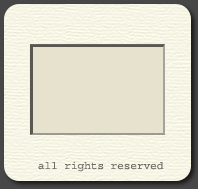
<style>
.page{position:relative;width:198px;height:189px;background:#e6e2ce}
.page>*{position:absolute;margin:0}
.t1{font:11px "Courier";color:#6c6b64}
</style>
<div class="page">
<p class="t1" style="left:38px;top:161px;width:126px;height:11px">all rights reserved</p>
</div>
